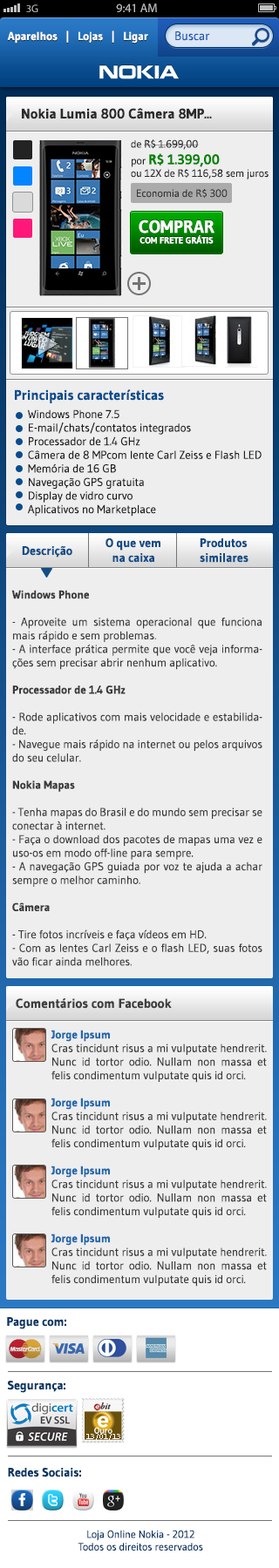
<style>
.page{position:relative;width:279px;height:1568px;background:#eeeeee}
.page>*{position:absolute;margin:0}
.t1{font:10.7px "MyriadPro-Regular";color:#bfbfbf}
.t2{font:12.2px "MyriadPro-Regular";color:#bfbfbf}
.t3{font:11.3px "Gudea-Bold";color:#ffffff}
.t4{font:12.2px "Gudea";color:#1e58b1}
.t5{font:13.9px "Gudea-Bold";color:#2a2a2a}
.t6{font:10.5px "Gudea";color:#262626}
.t7{font:13.9px "Gudea-Bold";color:#008300}
.t8{font:10.5px "Gudea";color:#373737}
.t9{font:8.8px "Gudea-Bold";color:#ffffff;text-transform:uppercase}
.t10{font:17.6px "Gudea-Bold";color:#ffffff;text-transform:uppercase}
.t11{font:13.9px "Gudea-Bold";color:#094c8d}
.t12{font:11.3px "Gudea";color:#1e1e1e}
.t13{font:12.2px "Gudea-Bold";color:#124c85}
.t14{font:12.2px/14.8px "Gudea-Bold";color:#124c85}
.t15{font:11.3px "Gudea";color:#3b3b3b}
.t16{font:11.3px "Gudea-Bold";color:#3b3b3b}
.t17{font:13.1px "Gudea-Bold";color:#3e3e3e}
.t18{font:11.3px "Gudea-Bold";color:#2067ac}
.t19{font:12.2px "Gudea-Bold";color:#063665}
.t20{font:10.5px "Gudea";color:#063665}
</style>
<div class="page">
<p class="t1" style="left:26px;top:4px;width:12px;height:8px">3G</p>
<p class="t2" style="left:116px;top:3px;width:41px;height:9px">9:41 AM</p>
<p class="t3" style="left:7px;top:30px;width:141px;height:14px">Aparelhos   |   Lojas   |   Ligar</p>
<p class="t4" style="left:175px;top:31px;width:35px;height:10px">Buscar</p>
<p class="t5" style="left:22px;top:108px;width:190px;height:11px">Nokia Lumia 800 Câmera 8MP...</p>
<p class="t6" style="left:131px;top:139px;width:137px;height:40px">de R$ 1.699,00<br>por <span class="t7">R$ 1.399,00</span><br>ou 12X de R$ 116,58 sem juros</p>
<p class="t8" style="left:137px;top:189px;width:90px;height:9px">Economia de R$ 300</p>
<p class="t9" style="left:139px;top:220px;width:75px;height:24px;text-align:center"><span class="t10">Comprar<br></span>com frete Grátis</p>
<p class="t11" style="left:15px;top:389px;width:149px;height:14px">Principais características</p>
<p class="t12" style="left:28px;top:409px;width:233px;height:108px">Windows Phone 7.5<br>    E-mail/chats/contatos integrados<br>    Processador de 1.4 GHz<br>    Câmera de 8 MPcom lente Carl Zeiss e Flash LED<br>    Memória de 16 GB<br>    Navegação GPS gratuita<br>    Display de vidro curvo<br>    Aplicativos no Marketplace</p>
<p class="t13" style="left:22px;top:545px;width:50px;height:13px">Descrição</p>
<p class="t14" style="left:105px;top:538px;width:55px;height:25px;text-align:center">O que vem<br>na caixa</p>
<p class="t14" style="left:199px;top:538px;width:49px;height:25px">Produtos<br>similares</p>
<p class="t15" style="left:11px;top:590px;width:251px;height:376px;text-align:justify"><span class="t16">Windows Phone<br></span><br>- Aproveite um sistema operacional que funciona mais rápido e sem problemas.<br>- A interface prática permite que você veja informações sem precisar abrir nenhum aplicativo.<br><br><span class="t16">Processador de 1.4 GHz<br></span><br>- Rode aplicativos com mais velocidade e estabilidade.<br>- Navegue mais rápido na internet ou pelos arquivos do seu celular.<br><br><span class="t16">Nokia Mapas<br></span><br>- Tenha mapas do Brasil e do mundo sem precisar se conectar à internet.<br>- Faça o download dos pacotes de mapas uma vez e uso-os em modo off-line para sempre.<br>- A navegação GPS guiada por voz te ajuda a achar sempre o melhor caminho.<br><br><span class="t16">Câmera<br></span><br>- Tire fotos incríveis e faça vídeos em HD.<br>- Com as lentes Carl Zeiss e o flash LED, suas fotos vão ficar ainda melhores.</p>
<p class="t17" style="left:16px;top:997px;width:156px;height:12px">Comentários com Facebook</p>
<p class="t15" style="left:51px;top:1030px;width:216px;height:257px;text-align:justify"><span class="t18">Jorge Ipsum<br></span>Cras tincidunt risus a mi vulputate hendrerit. Nunc id tortor odio. Nullam non massa et felis condimentum vulputate quis id orci.<br><br><span class="t18">Jorge Ipsum<br></span>Cras tincidunt risus a mi vulputate hendrerit. Nunc id tortor odio. Nullam non massa et felis condimentum vulputate quis id orci.<br><br><span class="t18">Jorge Ipsum<br></span>Cras tincidunt risus a mi vulputate hendrerit. Nunc id tortor odio. Nullam non massa et felis condimentum vulputate quis id orci.<br><br><span class="t18">Jorge Ipsum<br></span>Cras tincidunt risus a mi vulputate hendrerit. Nunc id tortor odio. Nullam non massa et felis condimentum vulputate quis id orci.</p>
<p class="t19" style="left:7px;top:1317px;width:59px;height:12px">Pague com:</p>
<p class="t19" style="left:7px;top:1381px;width:58px;height:12px">Segurança:</p>
<p class="t19" style="left:8px;top:1468px;width:73px;height:9px">Redes Sociais:</p>
<p class="t20" style="left:78px;top:1530px;width:125px;height:21px;text-align:center">Loja Online Nokia - 2012<br>Todos os direitos reservados</p>
</div>
